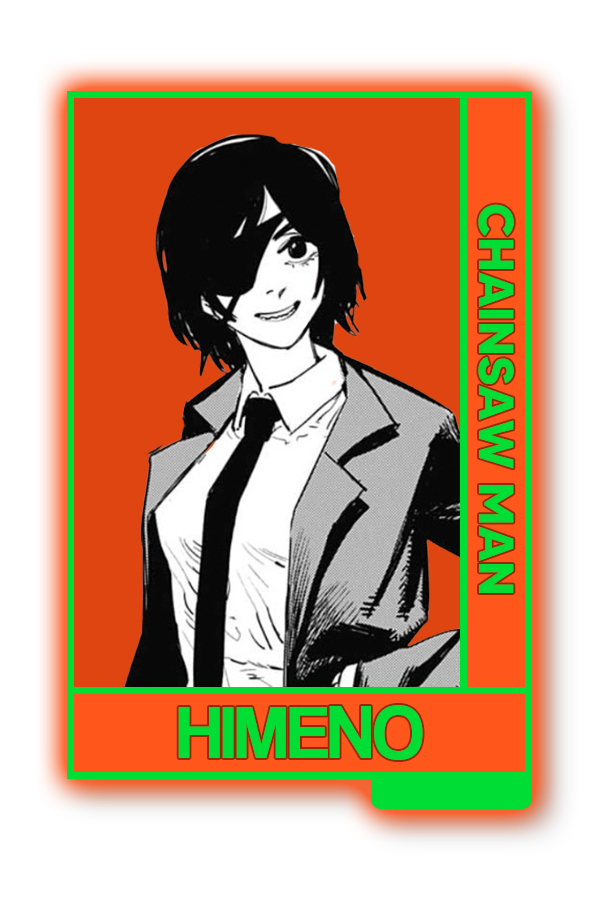
<style>
.page{position:relative;width:600px;height:900px;background:#ffffff}
.page>*{position:absolute;margin:0}
.t1{font:48.8px "MADETOMMY-Bold";color:#00dd35}
.t2{font:75.7px "CoolveticaRg-Regular";color:#00dd35}
</style>
<div class="page">
<p class="t1" style="left:478px;top:204px;width:36px;height:389px;rotate:90deg">CHAINSAW MAN</p>
<p class="t2" style="left:178px;top:705px;width:245px;height:55px">HIMENO</p>
</div>
